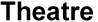
<style>
.page{position:relative;width:98px;height:22px;background:#ffffff}
.page>*{position:absolute;margin:0}
.t1{font:26px "Arial-BoldMT";color:#000000}
</style>
<div class="page">
<p class="t1" style="left:0px;top:1px;width:93px;height:20px">Theatre</p>
</div>
